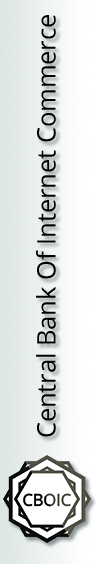
<style>
.page{position:relative;width:96px;height:564px}
.page>*{position:absolute;margin:0}
.t1{font:25.4px "OpenSans";color:#000000}
</style>
<div class="page">
<p class="t1" style="left:36px;top:15px;width:20px;height:422px;rotate:-90deg">Central Bank Of Internet Commerce</p>
</div>
